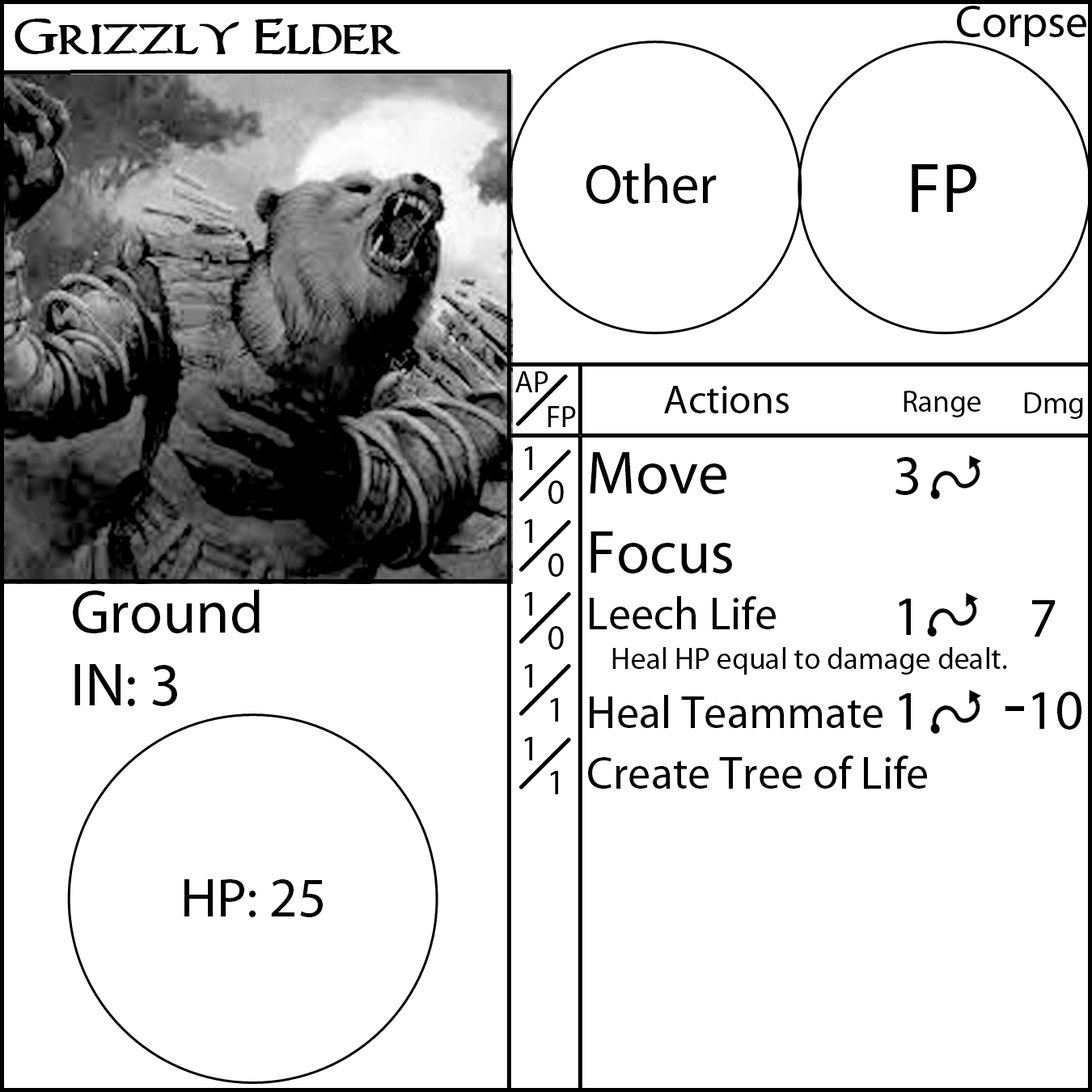
<style>
.page{position:relative;width:1092px;height:1092px;background:#ffffff}
.page>*{position:absolute;margin:0}
.t1{font:55.6px "WoodgodExpanded";color:#000000}
.t2{font:55.6px "MyriadPro-Regular";color:#000000}
.t3{font:70.8px "MyriadPro-Regular";color:#000000}
.t4{font:30.3px "MyriadPro-Regular";color:#000000}
.t5{font:40.4px "MyriadPro-Regular";color:#000000}
.t6{font:35.4px "MyriadPro-Regular";color:#000000}
.t7{font:45.5px "MyriadPro-Regular";color:#000000}
.t8{font:60.7px "MyriadPro-Regular";color:#000000}
.t9{font:75.8px "MyriadPro-Regular";color:#000000}
</style>
<div class="page">
<p class="t1" style="left:15px;top:19px;width:386px;height:35px">Grizzly Elder</p>
<p class="t2" style="left:586px;top:163px;width:131px;height:41px">Other</p>
<p class="t3" style="left:912px;top:164px;width:64px;height:48px">FP</p>
<p class="t4" style="left:515px;top:371px;width:33px;height:21px">AP</p>
<p class="t5" style="left:664px;top:386px;width:125px;height:27px">Actions</p>
<p class="t4" style="left:904px;top:391px;width:77px;height:26px">Range</p>
<p class="t4" style="left:1024px;top:392px;width:59px;height:27px">Dmg</p>
<p class="t4" style="left:548px;top:406px;width:28px;height:21px">FP</p>
<p class="t6" style="left:524px;top:447px;width:8px;height:313px">1<br>1<br>1<br>1<br>1</p>
<p class="t7" style="left:588px;top:452px;width:419px;height:337px"><span class="t8">Move<br>Focus<br></span>Leech Life<br><span class="t4"> Heal HP equal to damage dealt.<br></span>Heal Teammate<br>Create Tree of Life</p>
<p class="t2" style="left:895px;top:457px;width:23px;height:273px;text-align:center">3<br><br>1<br>1</p>
<p class="t6" style="left:548px;top:480px;width:16px;height:314px">0<br>0<br>0<br>1<br>1</p>
<p class="t8" style="left:73px;top:590px;width:187px;height:116px">Ground<br>IN: 3</p>
<p class="t2" style="left:1005px;top:600px;width:76px;height:130px;text-align:center">7<br><span class="t9">-</span>10</p>
<p class="t2" style="left:184px;top:879px;width:139px;height:38px">HP: 25</p>
</div>
